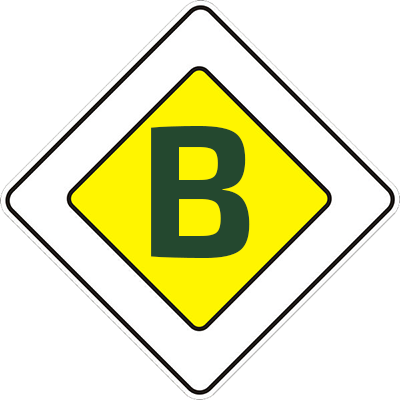
<style>
.page{position:relative;width:400px;height:400px;background:#ffffff}
.page>*{position:absolute;margin:0}
.t1{font:186.7px "Exo2-Bold";color:#24482f}
</style>
<div class="page">
<p class="t1" style="left:151px;top:126px;width:99px;height:132px">B</p>
</div>
